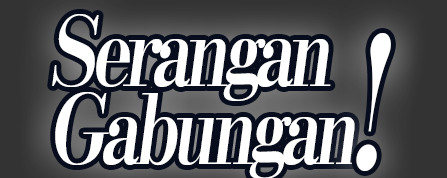
<style>
.page{position:relative;width:447px;height:178px;background:#070d1d}
.page>*{position:absolute;margin:0}
.t1{font:96px/78px "KochoStd-Heavy";letter-spacing:-0.08em;color:#ffffff;font-style:italic;scale:0.75 1}
.t2{font:180px "KochoStd-Heavy";letter-spacing:-0.08em;color:#ffffff;font-style:italic;scale:0.75 1}
</style>
<div class="page">
<p class="t1" style="left:52px;top:14px;width:305px;height:165px">Serangan<br>Gabungan</p>
<p class="t2" style="left:356px;top:33px;width:35px;height:139px">!</p>
</div>
